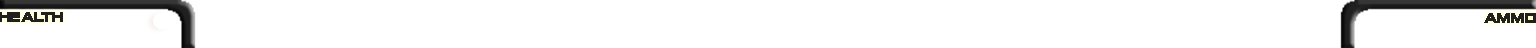
<style>
.page{position:relative;width:1536px;height:48px;background:#ffffff}
.page>*{position:absolute;margin:0}
.t1{font:15.2px "AlienEncountersSolidBold";color:#202020;scale:1.16 1}
.t2{font:14.5px "AlienEncountersSolidBold";color:#202020;scale:1.19 1}
</style>
<div class="page">
<p class="t1" style="left:0px;top:12px;width:63px;height:10px">health</p>
<p class="t2" style="left:1484px;top:13px;width:52px;height:10px">ammo</p>
</div>
